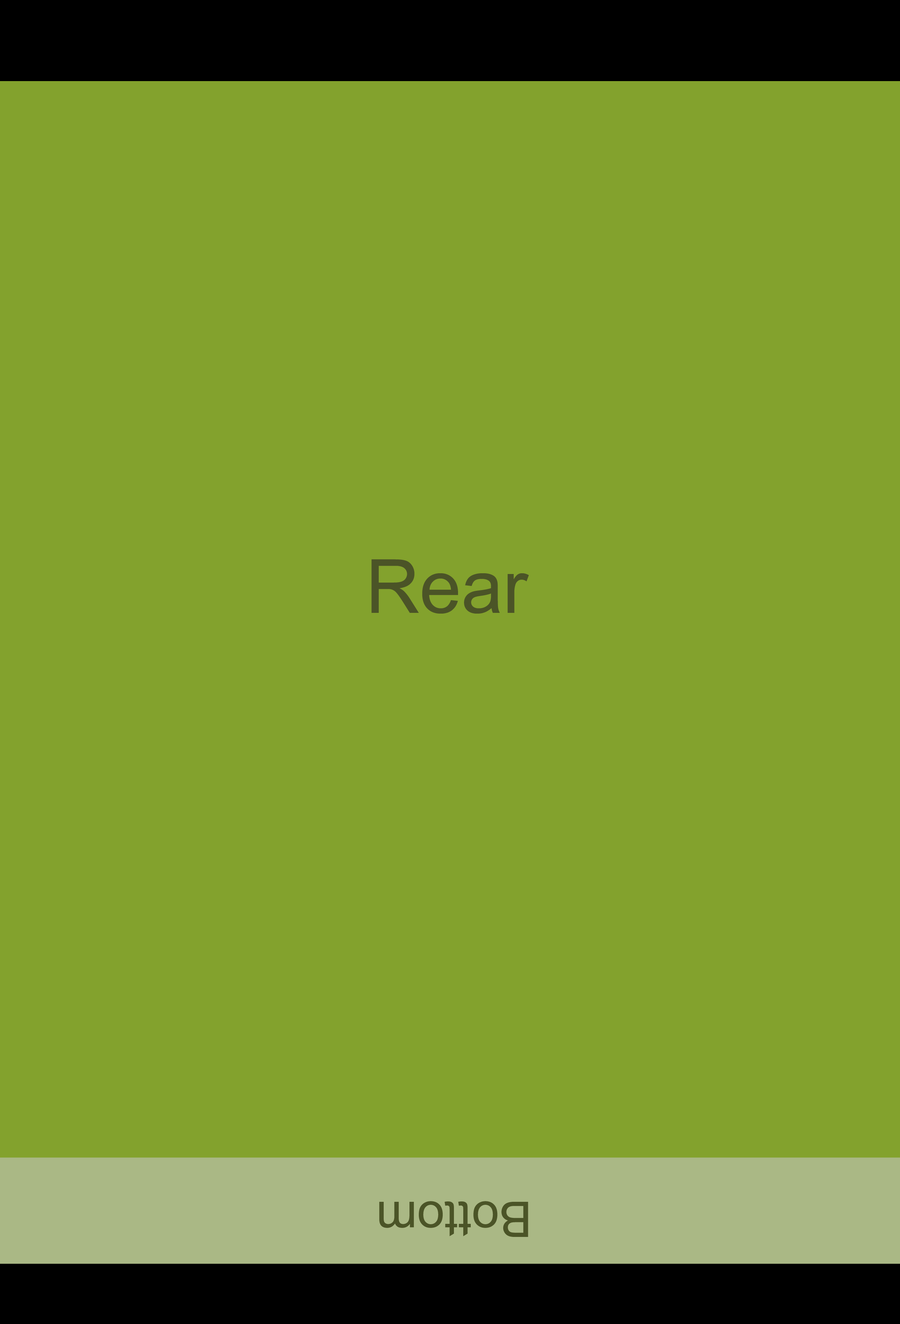
<style>
.page{position:relative;width:900px;height:1324px;background:#83a22d}
.page>*{position:absolute;margin:0}
.t1{font:74.8px "ArialMT";color:#5f6a32}
.t2{font:49.1px "ArialMT";color:#5f6a32}
</style>
<div class="page">
<p class="t1" style="left:372px;top:559px;width:157px;height:55px">Rear</p>
<p class="t2" style="left:379px;top:1201px;width:150px;height:36px;rotate:180deg">Bottom</p>
</div>
